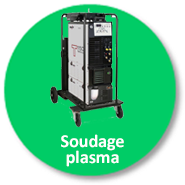
<style>
.page{position:relative;width:185px;height:185px;background:#00cc66}
.page>*{position:absolute;margin:0}
.t1{font:18px/16px "Calibri-Bold";color:#ffffff}
</style>
<div class="page">
<p class="t1" style="left:61px;top:134px;width:63px;height:33px;text-align:center">Soudage <br>plasma</p>
</div>
